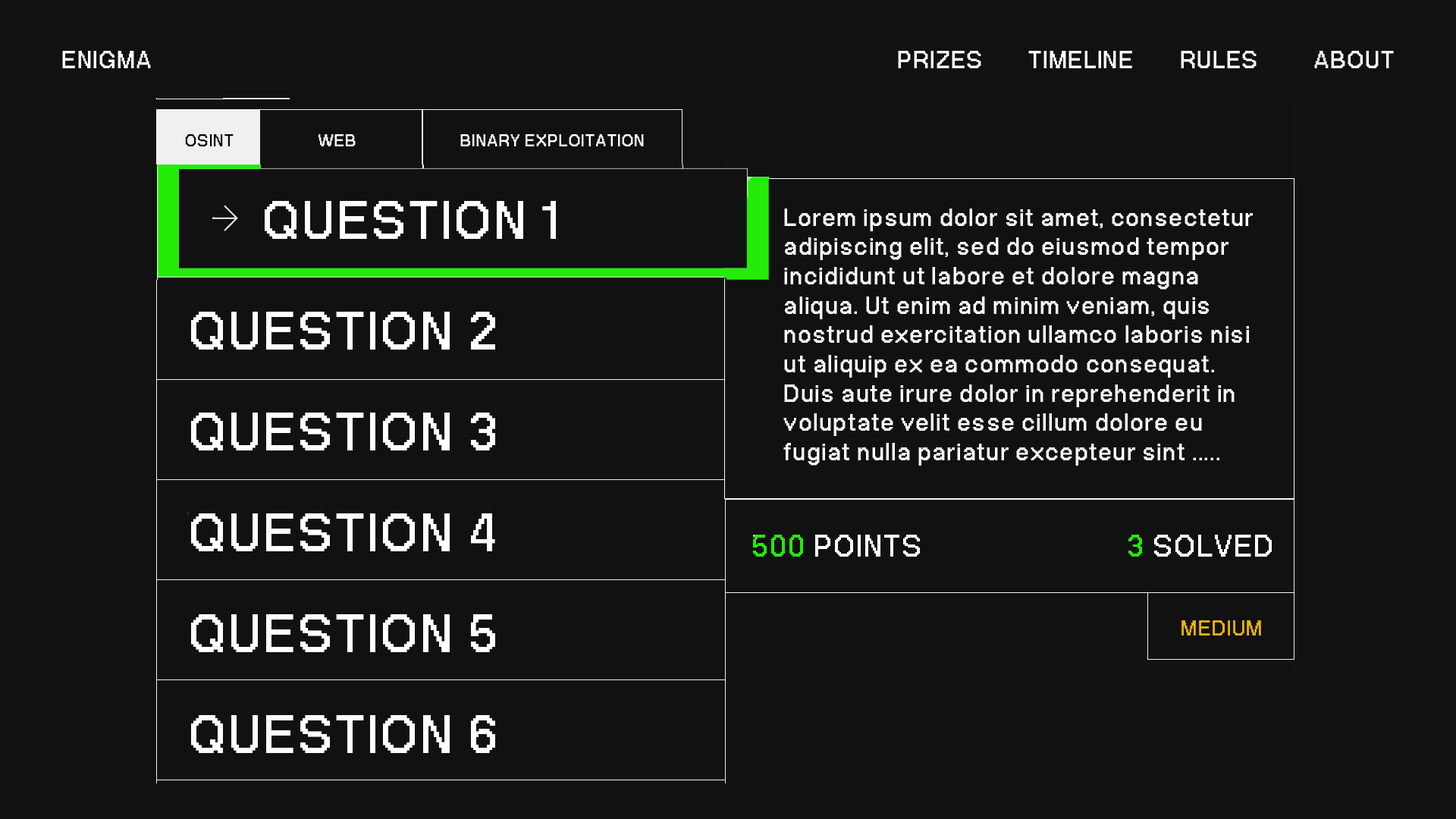
<style>
.page{position:relative;width:1456px;height:819px;background:#111111}
.page>*{position:absolute;margin:0}
.t1{font:33.8px "PPNeueBit-Bold";letter-spacing:0.03em;color:#ffffff}
.t2{font:24px "PPNeueBit-Bold";letter-spacing:0.03em;color:#000000}
.t3{font:24px "PPNeueBit-Bold";letter-spacing:0.03em;color:#ffffff}
.t4{font:75.6px "PPNeueBit-Bold";letter-spacing:0.03em;color:#ffffff}
.t5{font:34.6px/29.3px "PPNeueBit-Bold";letter-spacing:0.03em;color:#ffffff}
.t6{font:43.1px "PPNeueBit-Bold";letter-spacing:0.03em;color:#ffffff}
.t7{font:43.1px "PPNeueBit-Bold";letter-spacing:0.03em;color:#22ec08}
.t8{font:30.2px "PPNeueBit-Bold";letter-spacing:0.03em;color:#eab308}
</style>
<div class="page">
<p class="t1" style="left:62px;top:51px;width:89px;height:17px">ENIGMA</p>
<p class="t1" style="left:898px;top:51px;width:83px;height:17px">PRIZES</p>
<p class="t1" style="left:1028px;top:51px;width:104px;height:17px">TIMELINE</p>
<p class="t1" style="left:1181px;top:51px;width:76px;height:17px">RULES</p>
<p class="t1" style="left:1314px;top:51px;width:80px;height:17px">ABOUT</p>
<p class="t2" style="left:185px;top:134px;width:49px;height:12px">OSINT</p>
<p class="t3" style="left:318px;top:134px;width:38px;height:12px">WEB</p>
<p class="t3" style="left:460px;top:134px;width:184px;height:12px">BINARY EXPLOITATION</p>
<p class="t4" style="left:265px;top:201px;width:291px;height:38px">QUESTION 1</p>
<p class="t5" style="left:783px;top:209px;width:470px;height:257px">Lorem ipsum dolor sit amet, consectetur<br>adipiscing elit, sed do eiusmod tempor<br>incididunt ut labore et dolore magna<br>aliqua. Ut enim ad minim veniam, quis<br>nostrud exercitation ullamco laboris nisi<br>ut aliquip ex ea commodo consequat.<br>Duis aute irure dolor in reprehenderit in<br>voluptate velit esse cillum dolore eu<br>fugiat nulla pariatur excepteur sint .....</p>
<p class="t4" style="left:191px;top:312px;width:304px;height:38px">QUESTION 2</p>
<p class="t4" style="left:191px;top:413px;width:304px;height:37px">QUESTION 3</p>
<p class="t4" style="left:191px;top:513px;width:304px;height:38px">QUESTION 4</p>
<p class="t6" style="left:753px;top:535px;width:167px;height:22px"><span class="t7">500</span> POINTS</p>
<p class="t6" style="left:1128px;top:535px;width:144px;height:22px"><span class="t7">3</span> SOLVED</p>
<p class="t4" style="left:191px;top:614px;width:304px;height:38px">QUESTION 5</p>
<p class="t8" style="left:1181px;top:620px;width:80px;height:15px">MEDIUM</p>
<p class="t4" style="left:191px;top:715px;width:304px;height:38px">QUESTION 6</p>
</div>
